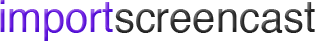
<style>
.page{position:relative;width:315px;height:41px;background:#ffffff}
.page>*{position:absolute;margin:0}
.t1{font:43.8px "Helvetica";color:#333333;scale:0.95 1}
.t2{font:43.8px "Helvetica";color:#6b1bdf;scale:0.95 1}
</style>
<div class="page">
<p class="t1" style="left:0px;top:0px;width:315px;height:41px"><span class="t2">import</span>screencast</p>
</div>
